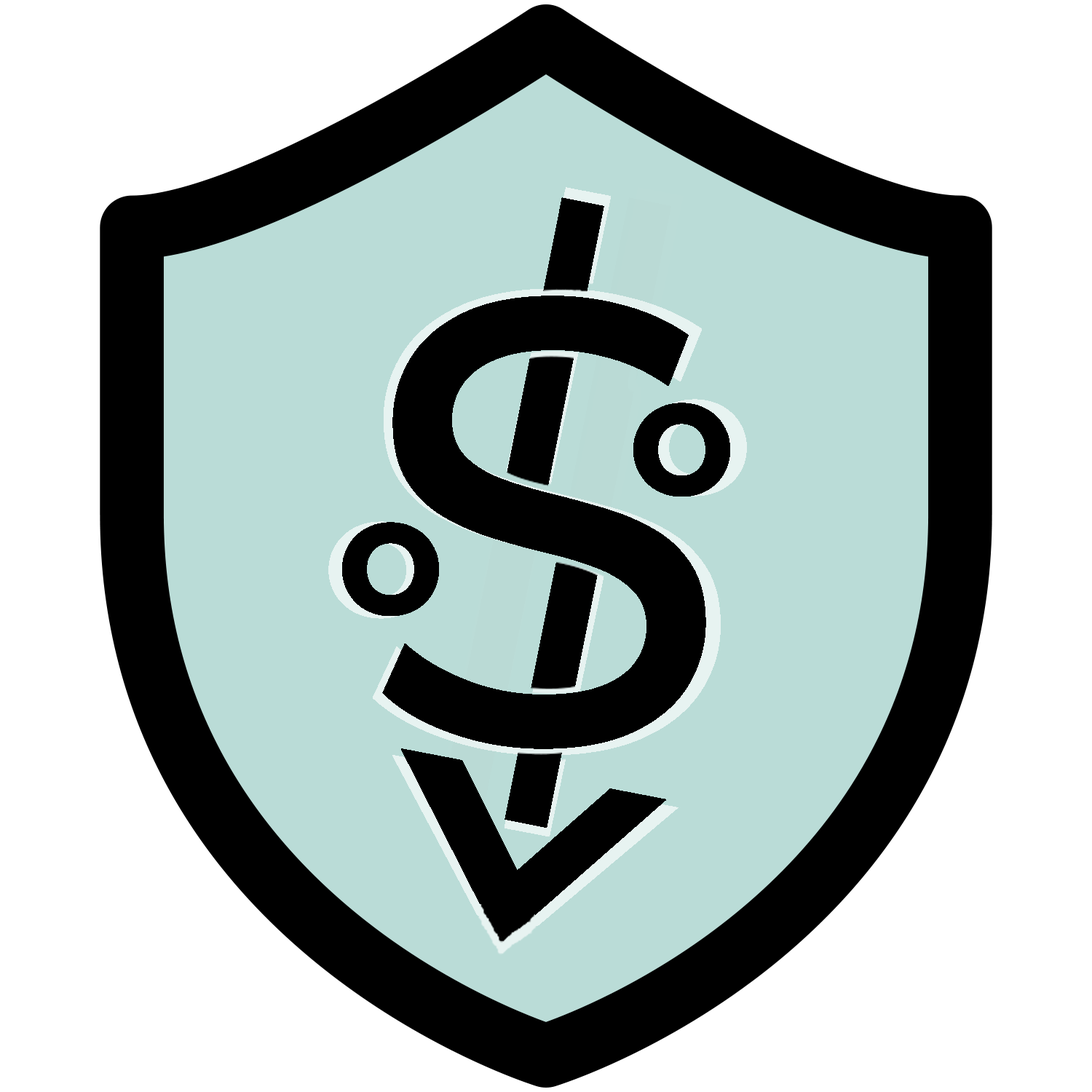
<style>
.page{position:relative;width:1092px;height:1092px;background:#ffffff}
.page>*{position:absolute;margin:0}
.t1{font:651.2px "MontserratRoman-Medium";letter-spacing:0.1em;color:#000000;text-transform:uppercase;font-weight:bold}
.t2{font:631.9px "MontserratRoman-Medium";letter-spacing:0.1em;color:#000000;text-transform:uppercase;font-weight:bold;scale:0.95 1}
.t3{font:129.2px "MontserratRoman-ExtraBold";letter-spacing:0.1em;color:#000000;text-transform:uppercase;font-weight:bold;scale:0.97 1}
.t4{font:133.1px "MontserratRoman-ExtraBold";letter-spacing:0.1em;color:#000000;text-transform:uppercase;font-weight:bold}
.t5{font:196.3px "MontserratRoman-Bold";letter-spacing:0.1em;color:#000000;text-transform:uppercase;font-weight:bold;scale:1.79 1}
.t6{font:202.6px "MontserratRoman-Bold";letter-spacing:0.1em;color:#000000;text-transform:uppercase;font-weight:bold;scale:1.87 1}
</style>
<div class="page">
<p class="t1" style="left:373px;top:288px;width:348px;height:468px">s</p>
<p class="t2" style="left:382px;top:296px;width:324px;height:453px">s</p>
<p class="t3" style="left:633px;top:403px;width:97px;height:93px">o</p>
<p class="t4" style="left:328px;top:521px;width:105px;height:98px">o</p>
<p class="t3" style="left:342px;top:522px;width:97px;height:94px">o</p>
<p class="t5" style="left:401px;top:748px;width:265px;height:167px;rotate:11deg">V</p>
<p class="t6" style="left:392px;top:755px;width:286px;height:171px;rotate:10deg">V</p>
</div>
